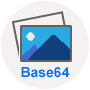
<style>
.page{position:relative;width:90px;height:90px;background:#f4f1f0}
.page>*{position:absolute;margin:0}
.t1{font:14px "Arial-BoldMT";color:#0076ef}
</style>
<div class="page">
<p class="t1" style="left:21px;top:67px;width:49px;height:11px">Base64</p>
</div>
